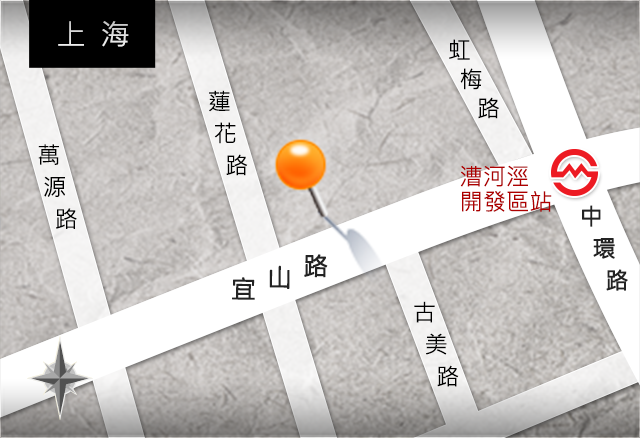
<style>
.page{position:relative;width:640px;height:438px}
.page>*{position:absolute;margin:0}
.t1{font:28.6px "MicrosoftJhengHeiRegular";color:#dfdfdf;text-transform:uppercase;scale:1.03 1}
.t2{font:23.3px/29.1px "MicrosoftJhengHeiRegular";color:#000000;text-transform:uppercase}
.t3{font:23.3px/32px "MicrosoftJhengHeiRegular";color:#000000;text-transform:uppercase}
.t4{font:23.3px/25.2px "MicrosoftJhengHeiRegular";color:#ae0000;text-transform:uppercase}
.t5{font:23.3px/32px "MicrosoftJhengHeiRegular";color:#232323;text-transform:uppercase;font-weight:bold}
.t6{font:25.2px "MicrosoftJhengHeiRegular";letter-spacing:0.4em;color:#232323;text-transform:uppercase;font-weight:bold}
</style>
<div class="page">
<p class="t1" style="left:58px;top:21px;width:71px;height:26px">上  海</p>
<p class="t2" style="left:449px;top:39px;width:50px;height:80px">虹<br>  梅<br>     路</p>
<p class="t3" style="left:209px;top:90px;width:39px;height:86px">蓮<br> 花<br>   路</p>
<p class="t3" style="left:38px;top:144px;width:39px;height:85px">萬<br> 源<br>   路</p>
<p class="t4" style="left:460px;top:165px;width:92px;height:47px">漕河涇<br>開發區站</p>
<p class="t5" style="left:582px;top:205px;width:46px;height:86px">中<br>  環<br>    路</p>
<p class="t6" style="left:232px;top:254px;width:96px;height:46px;rotate:1deg">宜山路</p>
<p class="t3" style="left:414px;top:301px;width:45px;height:86px">古<br>  美<br>    路</p>
</div>
